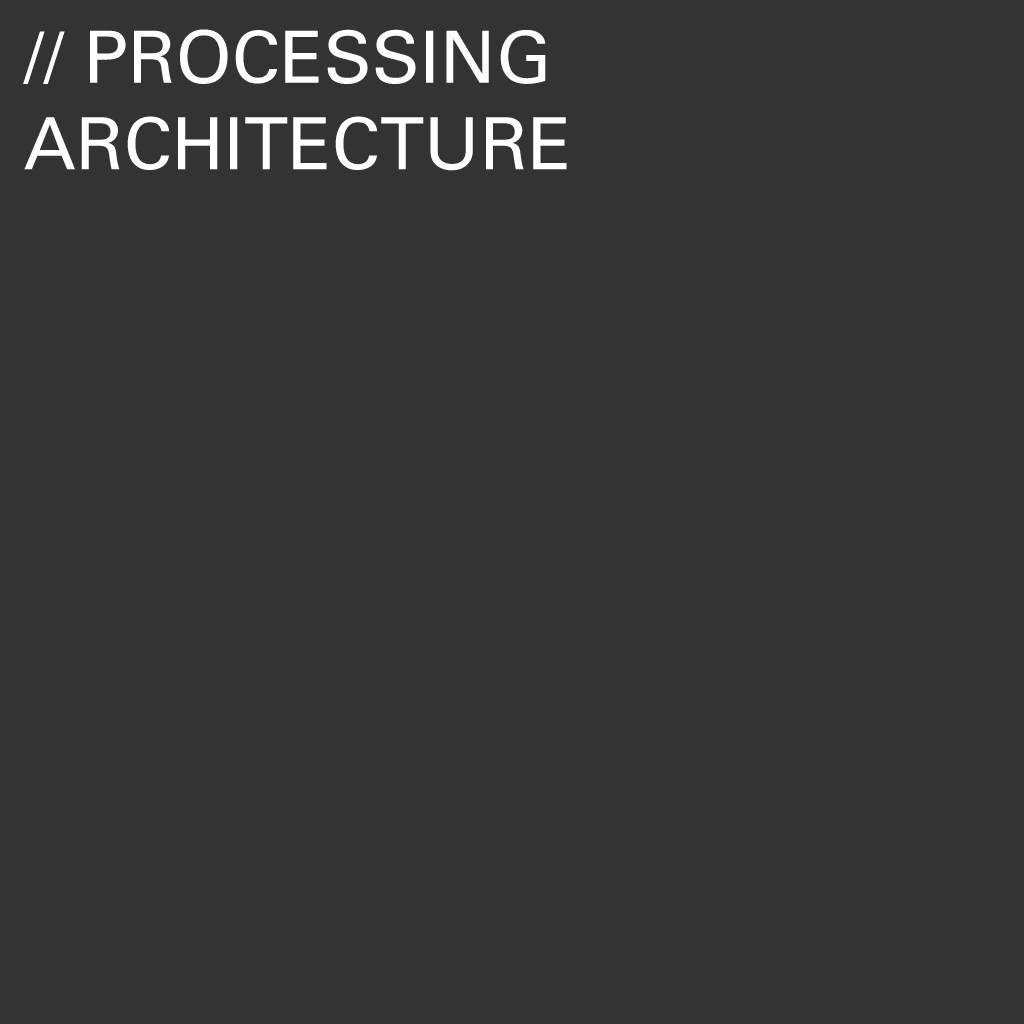
<style>
.page{position:relative;width:1024px;height:1024px;background:#333333}
.page>*{position:absolute;margin:0}
.t1{font:72px "UniversLTStd";color:#ffffff}
</style>
<div class="page">
<p class="t1" style="left:23px;top:29px;width:544px;height:142px">// PROCESSING<br>ARCHITECTURE</p>
</div>
